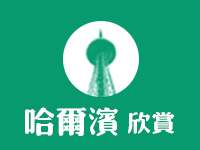
<style>
.page{position:relative;width:200px;height:150px;background:#079a6f}
.page>*{position:absolute;margin:0}
.t1{font:31.2px "¾­µä·±·ÂÔ² Regular";color:#ffffff}
.t2{font:23.7px "¾­µä·±·ÂÔ² Regular";color:#ffffff}
</style>
<div class="page">
<p class="t1" style="left:25px;top:107px;width:93px;height:29px">哈尔滨</p>
<p class="t2" style="left:128px;top:112px;width:46px;height:22px">欣赏</p>
</div>
